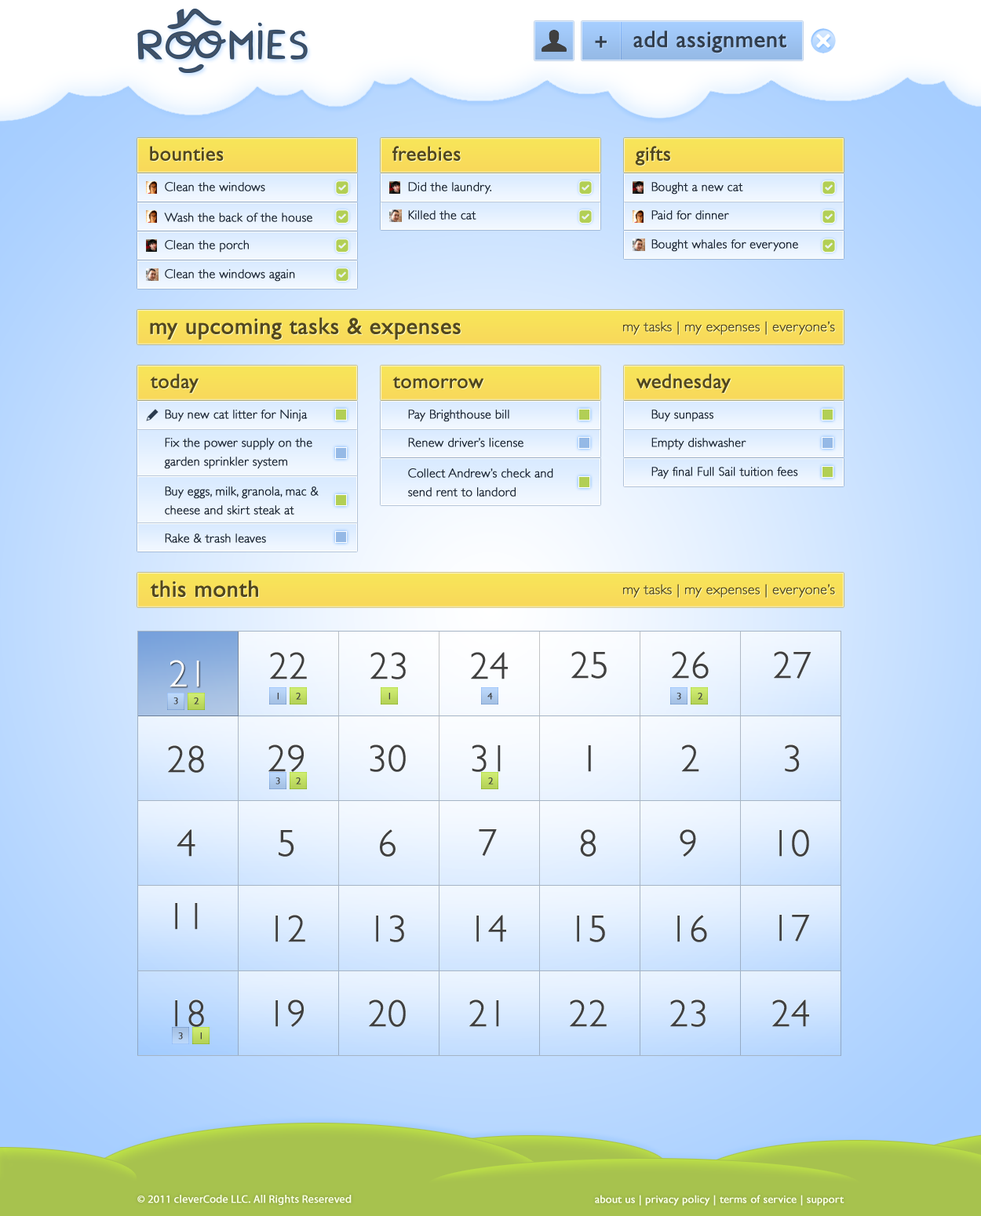
<style>
.page{position:relative;width:981px;height:1216px}
.page>*{position:absolute;margin:0}
.t1{font:23.5px "GillSans";color:#323e4d;font-weight:bold}
.t2{font:20.4px "GillSans";color:#52471e;font-weight:bold}
.t3{font:12.6px "GillSans-Light";color:#1c2633;font-weight:bold}
.t4{font:23.5px "GillSans";color:#52471e;font-weight:bold}
.t5{font:14.1px "GillSans-Light";color:#52471e;font-weight:bold}
.t6{font:12.6px/18.8px "GillSans-Light";color:#1c2633;font-weight:bold}
.t7{font:37.7px "GillSans-Light";color:#404040;font-weight:bold}
.t8{font:37.7px "GillSans-Light";color:#ffffff;font-weight:bold}
.t9{font:9.4px "GillSans-Light";color:#404040;font-weight:bold}
.t10{font:11px "MyriadPro-Regular";color:#f9ffe5;font-weight:bold}
.t11{font:11px "GillSans";color:#f9ffe5;font-weight:bold}
</style>
<div class="page">
<p class="t1" style="left:595px;top:31px;width:191px;height:22px">+    add assignment</p>
<p class="t2" style="left:150px;top:146px;width:74px;height:15px">bounties</p>
<p class="t2" style="left:392px;top:146px;width:69px;height:15px">freebies</p>
<p class="t2" style="left:635px;top:146px;width:35px;height:20px">gifts</p>
<p class="t3" style="left:165px;top:182px;width:100px;height:9px">Clean the windows</p>
<p class="t3" style="left:408px;top:182px;width:83px;height:13px">Did the laundry.</p>
<p class="t3" style="left:651px;top:182px;width:92px;height:13px">Bought a new cat</p>
<p class="t3" style="left:164px;top:213px;width:148px;height:9px">Wash the back of the house</p>
<p class="t3" style="left:408px;top:210px;width:68px;height:10px">Killed the cat</p>
<p class="t3" style="left:651px;top:210px;width:78px;height:10px">Paid for dinner</p>
<p class="t3" style="left:165px;top:240px;width:84px;height:13px">Clean the porch</p>
<p class="t3" style="left:651px;top:239px;width:147px;height:13px">Bought whales for everyone</p>
<p class="t3" style="left:165px;top:269px;width:130px;height:13px">Clean the windows again</p>
<p class="t4" style="left:150px;top:317px;width:311px;height:23px">my upcoming tasks &amp; expenses</p>
<p class="t5" style="left:623px;top:321px;width:212px;height:14px">my tasks | my expenses | everyone’s</p>
<p class="t2" style="left:150px;top:373px;width:48px;height:20px">today</p>
<p class="t2" style="left:392px;top:377px;width:91px;height:11px">tomorrow</p>
<p class="t2" style="left:635px;top:373px;width:95px;height:20px">wednesday</p>
<p class="t3" style="left:165px;top:410px;width:143px;height:12px">Buy new cat litter for Ninja</p>
<p class="t3" style="left:408px;top:410px;width:101px;height:12px">Pay Brighthouse bill</p>
<p class="t3" style="left:651px;top:410px;width:62px;height:12px">Buy sunpass</p>
<p class="t6" style="left:164px;top:438px;width:148px;height:31px">Fix the power supply on the garden sprinkler system</p>
<p class="t3" style="left:408px;top:438px;width:115px;height:9px">Renew driver’s license</p>
<p class="t3" style="left:651px;top:438px;width:95px;height:12px">Empty dishwasher</p>
<p class="t6" style="left:408px;top:468px;width:145px;height:29px">Collect Andrew’s check and send rent to landord</p>
<p class="t3" style="left:651px;top:467px;width:147px;height:12px">Pay final Full Sail tuition fees</p>
<p class="t6" style="left:165px;top:486px;width:154px;height:29px">Buy eggs, milk, granola, mac &amp; cheese and skirt steak at Publix</p>
<p class="t3" style="left:165px;top:533px;width:101px;height:10px">Rake &amp; trash leaves</p>
<p class="t4" style="left:150px;top:580px;width:108px;height:17px">this month</p>
<p class="t5" style="left:623px;top:584px;width:212px;height:14px">my tasks | my expenses | everyone’s</p>
<p class="t7" style="left:270px;top:652px;width:37px;height:27px">22</p>
<p class="t7" style="left:370px;top:652px;width:36px;height:27px">23</p>
<p class="t7" style="left:471px;top:652px;width:37px;height:27px">24</p>
<p class="t7" style="left:571px;top:651px;width:35px;height:28px">25</p>
<p class="t7" style="left:672px;top:651px;width:36px;height:28px">26</p>
<p class="t7" style="left:774px;top:651px;width:37px;height:28px">27</p>
<p class="t8" style="left:169px;top:660px;width:30px;height:27px">21</p>
<p class="t9" style="left:173px;top:697px;width:5px;height:7px">3</p>
<p class="t9" style="left:194px;top:697px;width:5px;height:7px">2</p>
<p class="t9" style="left:277px;top:693px;width:1px;height:7px">1</p>
<p class="t9" style="left:296px;top:693px;width:5px;height:7px">2</p>
<p class="t9" style="left:388px;top:693px;width:2px;height:7px">1</p>
<p class="t9" style="left:487px;top:693px;width:6px;height:7px">4</p>
<p class="t9" style="left:676px;top:693px;width:5px;height:7px">3</p>
<p class="t9" style="left:697px;top:693px;width:6px;height:7px">2</p>
<p class="t7" style="left:168px;top:745px;width:36px;height:28px">28</p>
<p class="t7" style="left:268px;top:744px;width:36px;height:28px">29</p>
<p class="t7" style="left:370px;top:744px;width:36px;height:28px">30</p>
<p class="t7" style="left:471px;top:744px;width:30px;height:28px">31</p>
<p class="t7" style="left:588px;top:745px;width:3px;height:27px">1</p>
<p class="t7" style="left:681px;top:744px;width:18px;height:28px">2</p>
<p class="t7" style="left:785px;top:744px;width:14px;height:28px">3</p>
<p class="t9" style="left:275px;top:777px;width:5px;height:8px">3</p>
<p class="t9" style="left:296px;top:777px;width:5px;height:8px">2</p>
<p class="t9" style="left:488px;top:777px;width:5px;height:8px">2</p>
<p class="t7" style="left:177px;top:829px;width:18px;height:28px">4</p>
<p class="t7" style="left:278px;top:830px;width:16px;height:27px">5</p>
<p class="t7" style="left:380px;top:829px;width:15px;height:28px">6</p>
<p class="t7" style="left:479px;top:829px;width:18px;height:27px">7</p>
<p class="t7" style="left:580px;top:829px;width:16px;height:28px">8</p>
<p class="t7" style="left:679px;top:829px;width:17px;height:28px">9</p>
<p class="t7" style="left:779px;top:829px;width:30px;height:28px">10</p>
<p class="t7" style="left:175px;top:903px;width:23px;height:27px">11</p>
<p class="t7" style="left:275px;top:915px;width:30px;height:27px">12</p>
<p class="t7" style="left:376px;top:915px;width:28px;height:27px">13</p>
<p class="t7" style="left:476px;top:915px;width:30px;height:27px">14</p>
<p class="t7" style="left:577px;top:916px;width:28px;height:26px">15</p>
<p class="t7" style="left:677px;top:915px;width:30px;height:27px">16</p>
<p class="t7" style="left:779px;top:915px;width:31px;height:26px">17</p>
<p class="t7" style="left:175px;top:999px;width:29px;height:28px">18</p>
<p class="t7" style="left:275px;top:999px;width:29px;height:28px">19</p>
<p class="t7" style="left:369px;top:999px;width:37px;height:28px">20</p>
<p class="t7" style="left:469px;top:999px;width:30px;height:28px">21</p>
<p class="t7" style="left:570px;top:999px;width:36px;height:28px">22</p>
<p class="t7" style="left:670px;top:999px;width:35px;height:28px">23</p>
<p class="t7" style="left:772px;top:999px;width:37px;height:28px">24</p>
<p class="t9" style="left:178px;top:1032px;width:5px;height:7px">3</p>
<p class="t9" style="left:200px;top:1032px;width:2px;height:7px">1</p>
<p class="t10" style="left:137px;top:1195px;width:214px;height:10px">© 2011 cleverCode LLC. All Rights Resereved</p>
<p class="t11" style="left:595px;top:1195px;width:249px;height:11px">about us | privacy policy | terms of service | support</p>
</div>
